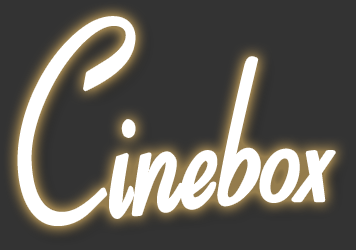
<style>
.page{position:relative;width:356px;height:250px;background:#333333}
.page>*{position:absolute;margin:0}
.t1{font:200px "Aspire-DemiBold";letter-spacing:-0.025em;color:#ffffff;scale:0.9 1}
</style>
<div class="page">
<p class="t1" style="left:19px;top:18px;width:315px;height:206px">Cinebox</p>
</div>
